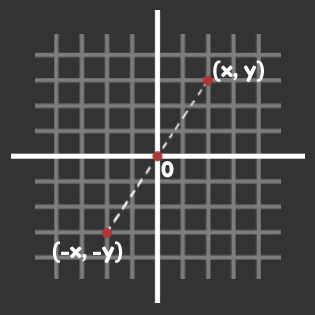
<style>
.page{position:relative;width:315px;height:315px;background:#333333}
.page>*{position:absolute;margin:0}
.t1{font:21.4px "FredokaOne-Regular";color:#ffffff}
</style>
<div class="page">
<p class="t1" style="left:213px;top:60px;width:51px;height:22px">(x, y)</p>
<p class="t1" style="left:161px;top:161px;width:13px;height:17px">0</p>
<p class="t1" style="left:52px;top:241px;width:71px;height:22px">(-x, -y)</p>
</div>
